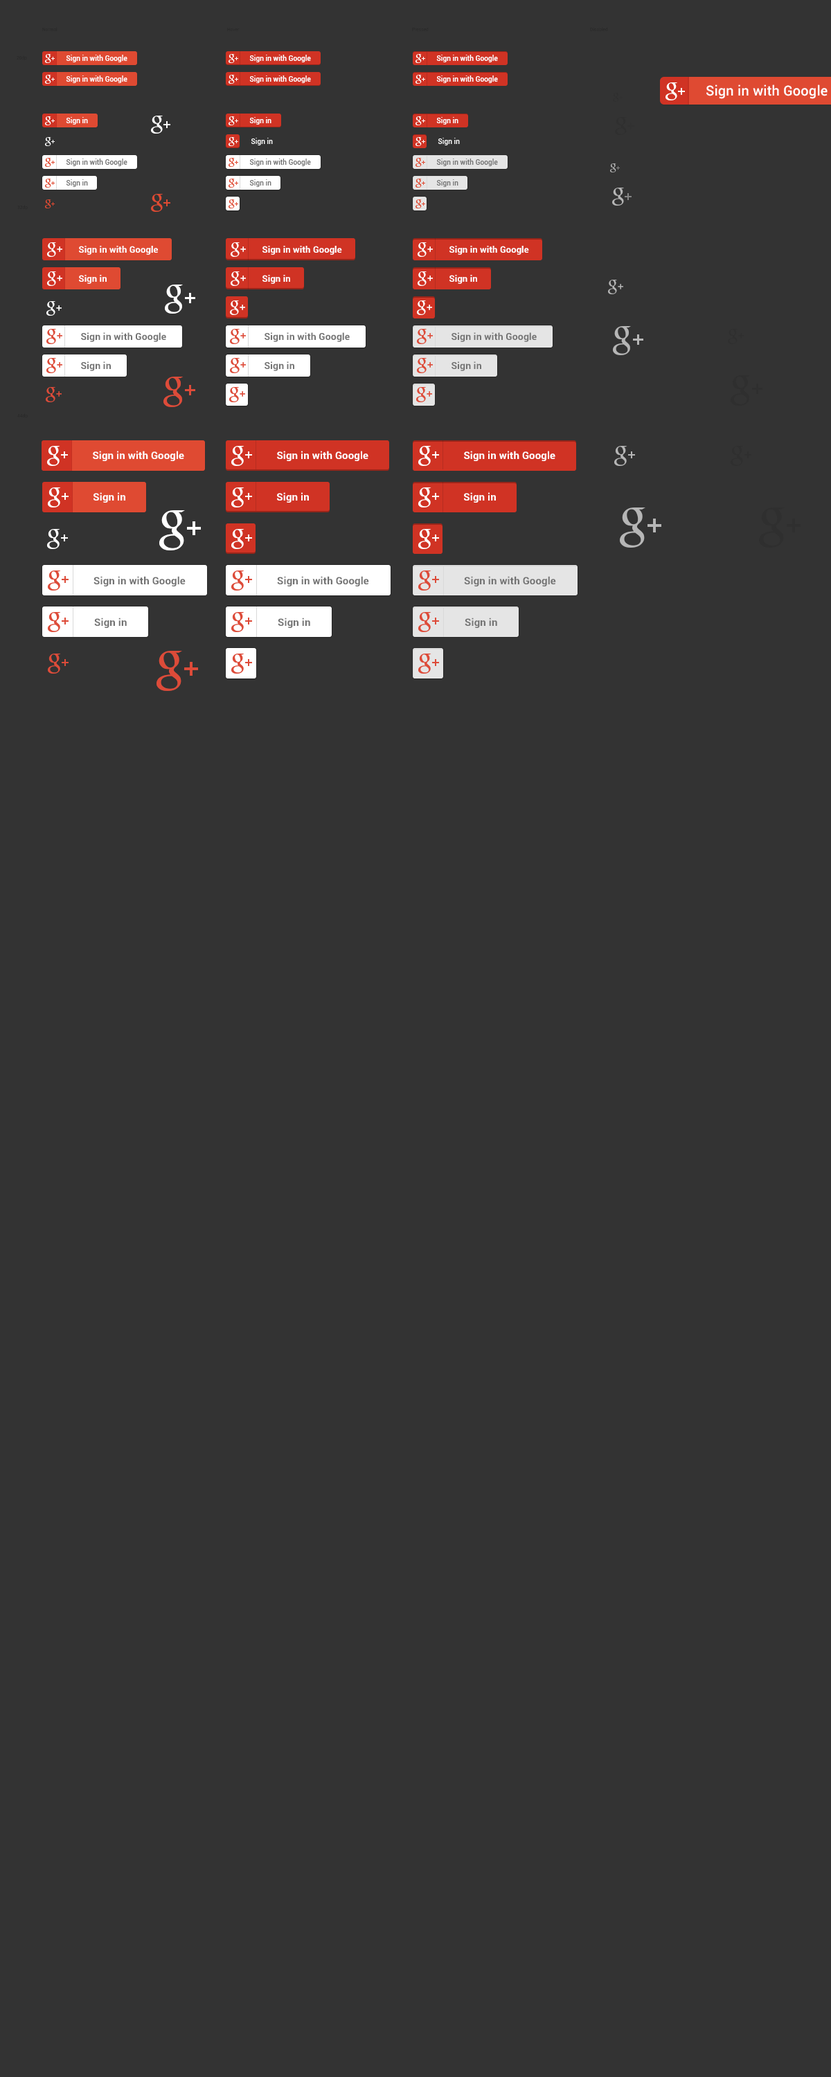
<style>
.page{position:relative;width:831px;height:2077px;background:#333333}
.page>*{position:absolute;margin:0}
.t1{font:4.6px "Roboto-Regular";color:#262626}
.t2{font:6.9px "Roboto-Medium";letter-spacing:0.01em;color:#ffffff}
.t3{font:13.8px "Roboto-Medium";letter-spacing:0.01em;color:#ffffff}
.t4{font:6.9px "Roboto-Medium";letter-spacing:0.01em;color:#737373}
.t5{font:9px "Roboto-Bold";letter-spacing:0.01em;color:#ffffff}
.t6{font:9px "Roboto-Bold";letter-spacing:0.05em;color:#ffffff}
.t7{font:9.7px "Roboto-Bold";letter-spacing:0.01em;color:#737373}
.t8{font:9.7px "Roboto-Bold";letter-spacing:0.05em;color:#737373}
.t9{font:10.4px "Roboto-Bold";letter-spacing:0.01em;color:#ffffff}
.t10{font:10.4px "Roboto-Bold";letter-spacing:0.05em;color:#ffffff}
.t11{font:10.4px "Roboto-Bold";letter-spacing:0.01em;color:#737373}
.t12{font:10.4px "Roboto-Bold";letter-spacing:0.05em;color:#737373}
</style>
<div class="page">
<p class="t1" style="left:42px;top:27px;width:15px;height:4px">Normal</p>
<p class="t1" style="left:227px;top:28px;width:13px;height:3px">Hover</p>
<p class="t1" style="left:412px;top:27px;width:17px;height:4px">Pressed</p>
<p class="t1" style="left:590px;top:27px;width:18px;height:4px">Disabled</p>
<p class="t1" style="left:17px;top:55px;width:10px;height:5px">20dp</p>
<p class="t2" style="left:66px;top:55px;width:61px;height:7px">Sign in with Google</p>
<p class="t2" style="left:249px;top:55px;width:62px;height:7px">Sign in with Google</p>
<p class="t2" style="left:436px;top:55px;width:62px;height:7px">Sign in with Google</p>
<p class="t2" style="left:66px;top:75px;width:61px;height:8px">Sign in with Google</p>
<p class="t2" style="left:249px;top:75px;width:62px;height:8px">Sign in with Google</p>
<p class="t2" style="left:436px;top:75px;width:62px;height:8px">Sign in with Google</p>
<p class="t3" style="left:706px;top:84px;width:121px;height:15px">Sign in with Google</p>
<p class="t2" style="left:66px;top:117px;width:22px;height:8px">Sign in</p>
<p class="t2" style="left:249px;top:117px;width:22px;height:8px">Sign in</p>
<p class="t2" style="left:436px;top:117px;width:22px;height:8px">Sign in</p>
<p class="t2" style="left:251px;top:138px;width:22px;height:7px">Sign in</p>
<p class="t2" style="left:438px;top:138px;width:22px;height:7px">Sign in</p>
<p class="t4" style="left:66px;top:159px;width:61px;height:7px">Sign in with Google</p>
<p class="t4" style="left:249px;top:159px;width:62px;height:7px">Sign in with Google</p>
<p class="t4" style="left:436px;top:159px;width:62px;height:7px">Sign in with Google</p>
<p class="t4" style="left:66px;top:179px;width:22px;height:8px">Sign in</p>
<p class="t4" style="left:249px;top:179px;width:22px;height:8px">Sign in</p>
<p class="t4" style="left:436px;top:179px;width:22px;height:8px">Sign in</p>
<p class="t1" style="left:17px;top:205px;width:11px;height:5px">32dp</p>
<p class="t5" style="left:79px;top:246px;width:79px;height:9px">Sign in with Googl<span class="t6">e</span></p>
<p class="t5" style="left:262px;top:246px;width:80px;height:9px">Sign in with Googl<span class="t6">e</span></p>
<p class="t5" style="left:449px;top:246px;width:80px;height:9px">Sign in with Googl<span class="t6">e</span></p>
<p class="t5" style="left:79px;top:275px;width:28px;height:9px">Sign in</p>
<p class="t5" style="left:262px;top:275px;width:28px;height:9px">Sign in</p>
<p class="t5" style="left:449px;top:275px;width:28px;height:9px">Sign in</p>
<p class="t7" style="left:81px;top:332px;width:85px;height:10px">Sign in with Googl<span class="t8">e</span></p>
<p class="t7" style="left:264px;top:332px;width:86px;height:10px">Sign in with Googl<span class="t8">e</span></p>
<p class="t7" style="left:451px;top:332px;width:86px;height:10px">Sign in with Googl<span class="t8">e</span></p>
<p class="t7" style="left:81px;top:361px;width:30px;height:10px">Sign in</p>
<p class="t7" style="left:264px;top:361px;width:30px;height:10px">Sign in</p>
<p class="t7" style="left:451px;top:361px;width:30px;height:10px">Sign in</p>
<p class="t1" style="left:17px;top:413px;width:11px;height:5px">44dp</p>
<p class="t9" style="left:93px;top:451px;width:91px;height:10px">Sign in with Googl<span class="t10">e</span></p>
<p class="t9" style="left:277px;top:451px;width:91px;height:10px">Sign in with Googl<span class="t10">e</span></p>
<p class="t9" style="left:464px;top:451px;width:91px;height:10px">Sign in with Googl<span class="t10">e</span></p>
<p class="t9" style="left:93px;top:492px;width:32px;height:11px">Sign in</p>
<p class="t9" style="left:277px;top:492px;width:32px;height:11px">Sign in</p>
<p class="t9" style="left:464px;top:492px;width:32px;height:11px">Sign in</p>
<p class="t11" style="left:93px;top:576px;width:93px;height:10px">Sign in with Googl<span class="t12">e</span></p>
<p class="t11" style="left:277px;top:576px;width:92px;height:10px">Sign in with Googl<span class="t12">e</span></p>
<p class="t11" style="left:464px;top:576px;width:92px;height:10px">Sign in with Googl<span class="t12">e</span></p>
<p class="t11" style="left:94px;top:618px;width:33px;height:10px">Sign in</p>
<p class="t11" style="left:278px;top:618px;width:32px;height:10px">Sign in</p>
<p class="t11" style="left:465px;top:618px;width:32px;height:10px">Sign in</p>
</div>
